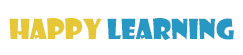
<style>
.page{position:relative;width:243px;height:55px;background:#ffffff}
.page>*{position:absolute;margin:0}
.t1{font:27px "ShowcardGothic-Reg";color:#2798c3}
.t2{font:27px "ShowcardGothic-Reg";color:#e6c737}
</style>
<div class="page">
<p class="t1" style="left:9px;top:18px;width:225px;height:23px"><span class="t2">HAPPY</span> LEARNING</p>
</div>
